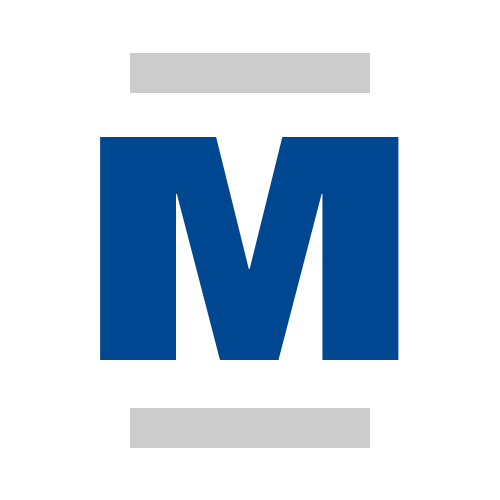
<style>
.page{position:relative;width:500px;height:500px;background:#ffffff}
.page>*{position:absolute;margin:0}
.t1{font:311.8px "HelveticaNeue-CondensedBlack";color:#004791;scale:1.4 1}
</style>
<div class="page">
<p class="t1" style="left:100px;top:137px;width:299px;height:223px">M</p>
</div>
